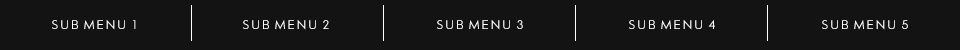
<style>
.page{position:relative;width:960px;height:50px;background:#131313}
.page>*{position:absolute;margin:0}
.t1{font:12px "Pasajero";color:#ffffff}
</style>
<div class="page">
<p class="t1" style="left:52px;top:20px;width:84px;height:10px">s u b  m e n u  1</p>
<p class="t1" style="left:243px;top:20px;width:86px;height:10px">s u b  m e n u  2</p>
<p class="t1" style="left:437px;top:20px;width:86px;height:10px">s u b  m e n u  3</p>
<p class="t1" style="left:629px;top:20px;width:86px;height:10px">s u b  m e n u  4</p>
<p class="t1" style="left:822px;top:20px;width:86px;height:10px">s u b  m e n u  5</p>
</div>
